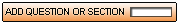
<style>
.page{position:relative;width:180px;height:24px;background:#ffffff}
.page>*{position:absolute;margin:0}
.t1{font:10.4px "Arial-BoldMT";letter-spacing:-0.1em;color:#060808;text-transform:uppercase}
</style>
<div class="page">
<p class="t1" style="left:5px;top:8px;width:119px;height:8px">Add Question  OR SECTION</p>
</div>
